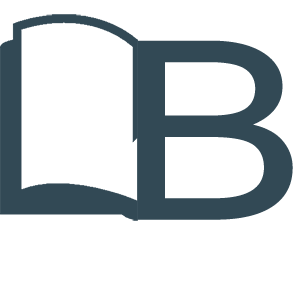
<style>
.page{position:relative;width:300px;height:289px;background:#ffffff}
.page>*{position:absolute;margin:0}
.t1{font:249.8px "MicrosoftSansSerif";color:#324955;scale:1.16 1}
</style>
<div class="page">
<p class="t1" style="left:137px;top:40px;width:156px;height:180px">B</p>
</div>
